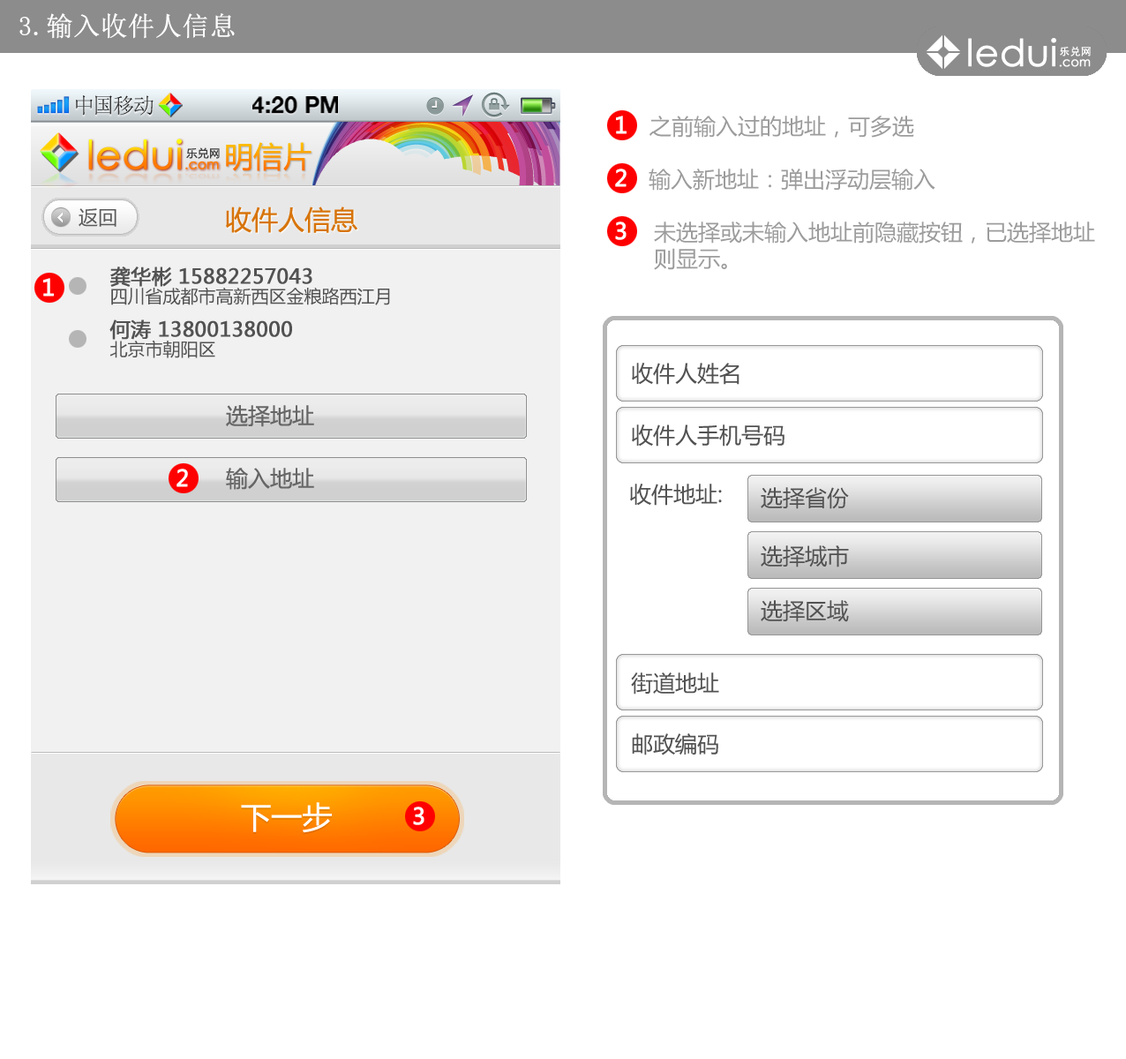
<style>
.page{position:relative;width:1126px;height:1059px;background:#ffffff}
.page>*{position:absolute;margin:0}
.t1{font:26.5px "SimSun";color:#ffffff;font-weight:bold}
.t2{font:21.5px "SimSun";color:#414141}
.t3{font:23.1px "HelveticaNeue-Bold";color:#000000;text-transform:uppercase}
.t4{font:22.1px "MicrosoftYaHei";color:#9c9c9c}
.t5{font:39.5px "CenturyGothic";font-weight:bold}
.t6{font:13.2px "CenturyGothic";font-weight:bold}
.t7{font:10.9px "MicrosoftYaHei";letter-spacing:0.05em;color:#3d3d3d}
.t8{font:29.1px "MicrosoftYaHei"}
.t9{font:23.7px "CenturyGothic";color:#e0d5ce;font-weight:bold;scale:1.67 1}
.t10{font:7.9px "CenturyGothic";color:#e0d5ce;font-weight:bold;scale:1.67 1}
.t11{font:19.4px "MicrosoftYaHei";color:#5b5b5b}
.t12{font:26.5px "MicrosoftYaHei";color:#d7740a}
.t13{font:17.6px/21.2px "MicrosoftYaHei";color:#525252}
.t14{font:20px/21.2px "MicrosoftYaHei";color:#525252;font-weight:bold}
.t15{font:22.1px "MicrosoftYaHei";color:#525252}
.t16{font:22.1px "MicrosoftYaHei";color:#666666}
.t17{font:30.6px "MicrosoftYaHei";color:#ffffff}
</style>
<div class="page">
<p class="t1" style="left:19px;top:13px;width:216px;height:26px">3.输入收件人信息</p>
<p class="t2" style="left:76px;top:95px;width:78px;height:21px">中国移动</p>
<p class="t3" style="left:252px;top:96px;width:86px;height:18px">4:20 PM</p>
<p class="t4" style="left:649px;top:116px;width:265px;height:22px">之前输入过的地址，可多选</p>
<p class="t5" style="left:88px;top:139px;width:131px;height:31px">ledui<span class="t6">.com</span></p>
<p class="t7" style="left:186px;top:147px;width:34px;height:12px">乐兑网</p>
<p class="t8" style="left:226px;top:142px;width:86px;height:29px">明信片</p>
<p class="t9" style="left:88px;top:173px;width:131px;height:19px">ledui<span class="t10">.com</span></p>
<p class="t4" style="left:649px;top:169px;width:286px;height:22px">输入新地址：弹出浮动层输入</p>
<p class="t11" style="left:79px;top:208px;width:37px;height:19px">返回</p>
<p class="t12" style="left:226px;top:206px;width:131px;height:27px">收件人信息</p>
<p class="t4" style="left:654px;top:222px;width:441px;height:48px">未选择或未输入地址前隐藏按钮，已选择地址<br>则显示。</p>
<p class="t13" style="left:110px;top:267px;width:280px;height:38px"><span class="t14">龚华彬 15882257043<br></span>四川省成都市高新西区金粮路西江月</p>
<p class="t14" style="left:109px;top:319px;width:183px;height:39px">何涛 13800138000<br><span class="t13">北京市朝阳区</span></p>
<p class="t15" style="left:632px;top:363px;width:108px;height:22px">收件人姓名</p>
<p class="t16" style="left:226px;top:405px;width:88px;height:22px">选择地址</p>
<p class="t15" style="left:632px;top:424px;width:153px;height:23px">收件人手机号码</p>
<p class="t16" style="left:226px;top:468px;width:88px;height:22px">输入地址</p>
<p class="t15" style="left:630px;top:484px;width:92px;height:22px">收件地址:</p>
<p class="t15" style="left:761px;top:487px;width:88px;height:22px">选择省份</p>
<p class="t15" style="left:761px;top:545px;width:88px;height:22px">选择城市</p>
<p class="t15" style="left:761px;top:600px;width:88px;height:22px">选择区域</p>
<p class="t15" style="left:631px;top:672px;width:88px;height:23px">街道地址</p>
<p class="t15" style="left:632px;top:733px;width:86px;height:22px">邮政编码</p>
<p class="t17" style="left:241px;top:802px;width:91px;height:31px">下一步</p>
</div>
